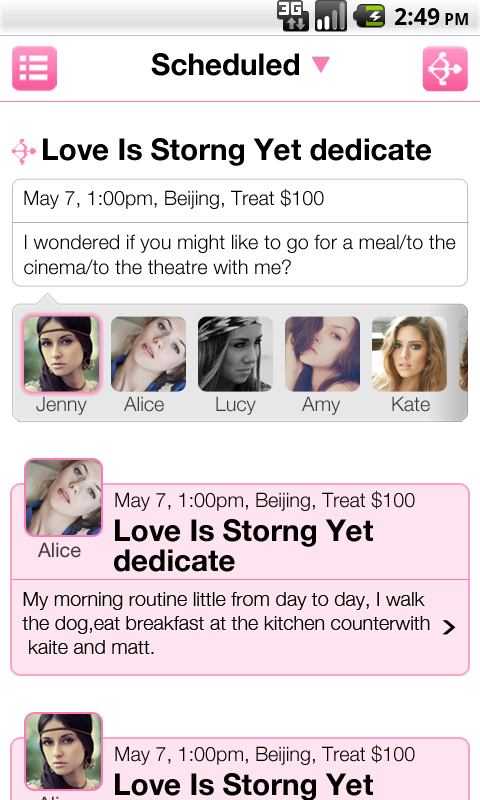
<style>
.page{position:relative;width:480px;height:800px;background:#ffffff}
.page>*{position:absolute;margin:0}
.t1{font:30px "HelveticaNeue-Bold";color:#000000}
.t2{font:20px "HelveticaNeue-Light";color:#000000}
.t3{font:20px/5px "HelveticaNeue-Light";color:#000000}
.t4{font:20px "HelveticaNeue-Light";color:#3a3a3a}
.t5{font:30px/30px "HelveticaNeue-Bold";color:#000000}
.t6{font:20px "HelveticaNeue";color:#40393c}
.t7{font:20px "HelveticaNeue-Light";color:#040404}
</style>
<div class="page">
<p class="t1" style="left:151px;top:53px;width:148px;height:23px">Scheduled</p>
<p class="t1" style="left:43px;top:138px;width:389px;height:28px">Love Is Storng Yet dedicate</p>
<p class="t2" style="left:24px;top:188px;width:300px;height:21px">May 7, 1:00pm, Beijing, Treat $100</p>
<p class="t3" style="left:24px;top:234px;width:432px;height:41px">I wondered if you might like to go for a meal/to the <br><br><br><br><br>cinema/to the theatre with me?</p>
<p class="t4" style="left:36px;top:396px;width:51px;height:19px">Jenny</p>
<p class="t4" style="left:124px;top:396px;width:40px;height:16px">Alice</p>
<p class="t4" style="left:216px;top:396px;width:40px;height:19px">Lucy</p>
<p class="t4" style="left:302px;top:396px;width:39px;height:19px">Amy</p>
<p class="t4" style="left:392px;top:396px;width:38px;height:16px">Kate</p>
<p class="t2" style="left:115px;top:490px;width:300px;height:21px">May 7, 1:00pm, Beijing, Treat $100</p>
<p class="t5" style="left:114px;top:519px;width:259px;height:53px">Love Is Storng Yet <br>dedicate</p>
<p class="t6" style="left:38px;top:542px;width:43px;height:16px">Alice</p>
<p class="t7" style="left:22px;top:592px;width:408px;height:62px">My morning routine little from day to day, I walk <br>the dog,eat breakfast at the kitchen counterwith<br> kaite and matt.</p>
<p class="t2" style="left:115px;top:744px;width:300px;height:21px">May 7, 1:00pm, Beijing, Treat $100</p>
</div>
